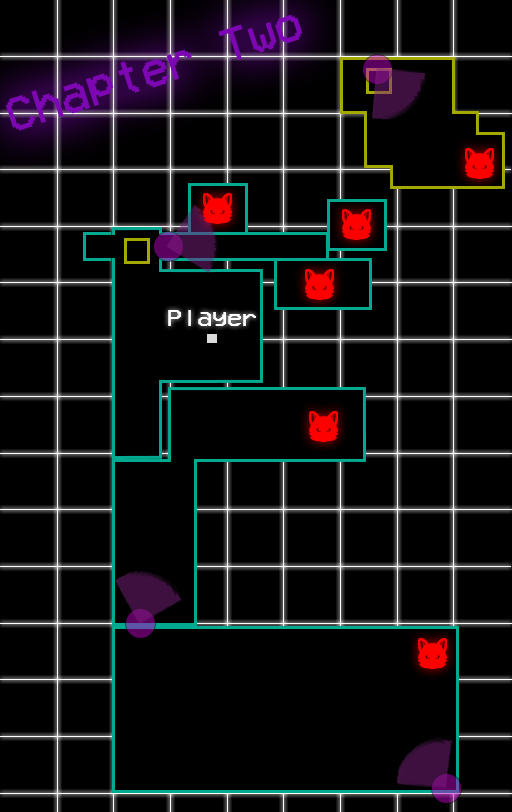
<style>
.page{position:relative;width:512px;height:812px;background:#000000}
.page>*{position:absolute;margin:0}
.t1{font:48px "VCROSDMono";color:#7d08b3}
.t2{font:22.9px "VCROSDMono";color:#ffffff;scale:1.12 1}
</style>
<div class="page">
<p class="t1" style="left:5px;top:14px;width:298px;height:117px;rotate:-18deg">Chapter Two</p>
<p class="t2" style="left:168px;top:310px;width:88px;height:16px">Player</p>
</div>
